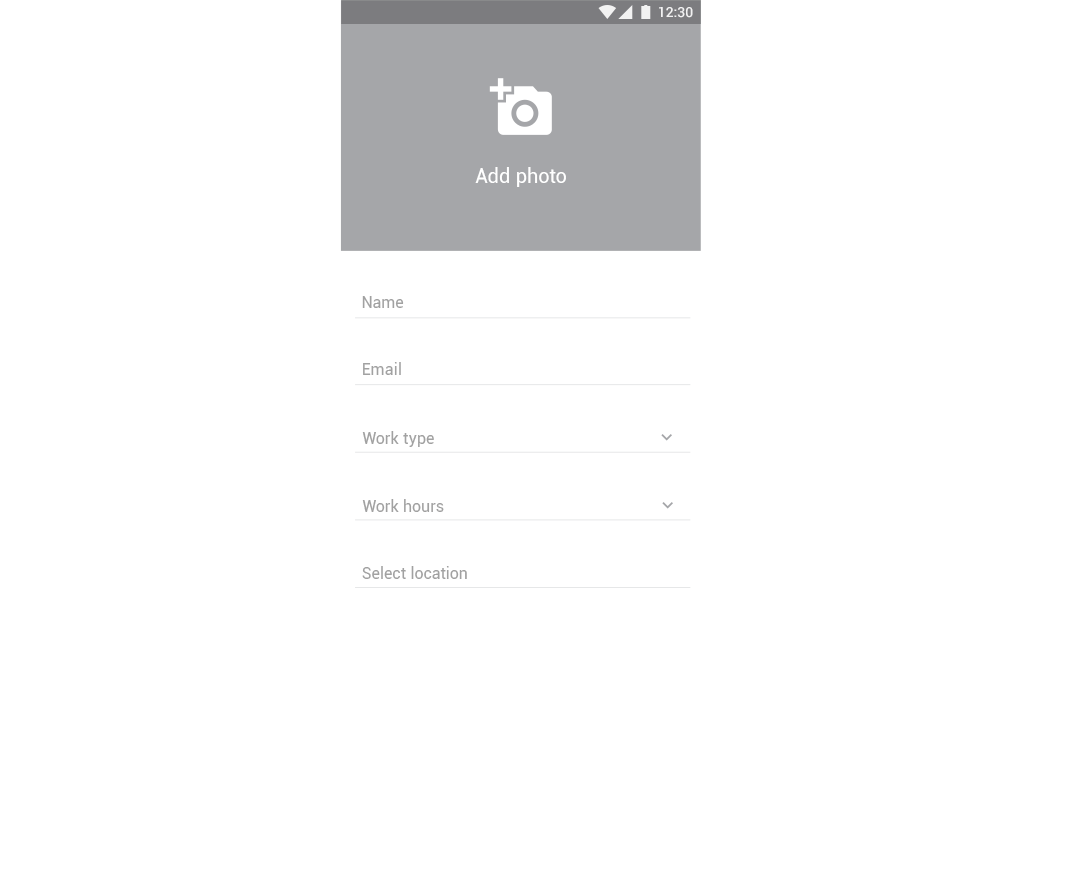
<style>
.page{position:relative;width:1080px;height:896px;background:#ffffff}
.page>*{position:absolute;margin:0}
.t1{font:14px "Roboto-Medium";color:#ffffff}
.t2{font:20px "Roboto-Regular";letter-spacing:0.01em;color:#ffffff}
.t3{font:16px "Roboto-Regular";letter-spacing:0.01em;color:#a1a1a1}
</style>
<div class="page">
<p class="t1" style="left:659px;top:7px;width:34px;height:11px">12:30</p>
<p class="t2" style="left:475px;top:167px;width:91px;height:20px">Add photo</p>
<p class="t3" style="left:362px;top:296px;width:42px;height:12px">Name</p>
<p class="t3" style="left:363px;top:362px;width:38px;height:13px">Email</p>
<p class="t3" style="left:362px;top:431px;width:72px;height:16px">Work type</p>
<p class="t3" style="left:362px;top:499px;width:82px;height:13px">Work hours</p>
<p class="t3" style="left:362px;top:566px;width:105px;height:13px">Select location</p>
</div>
